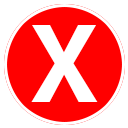
<style>
.page{position:relative;width:128px;height:128px;background:#ffffff}
.page>*{position:absolute;margin:0}
.t1{font:106.5px "Roboto-Bold";color:#ffffff}
</style>
<div class="page">
<p class="t1" style="left:31px;top:25px;width:67px;height:77px">X</p>
</div>
